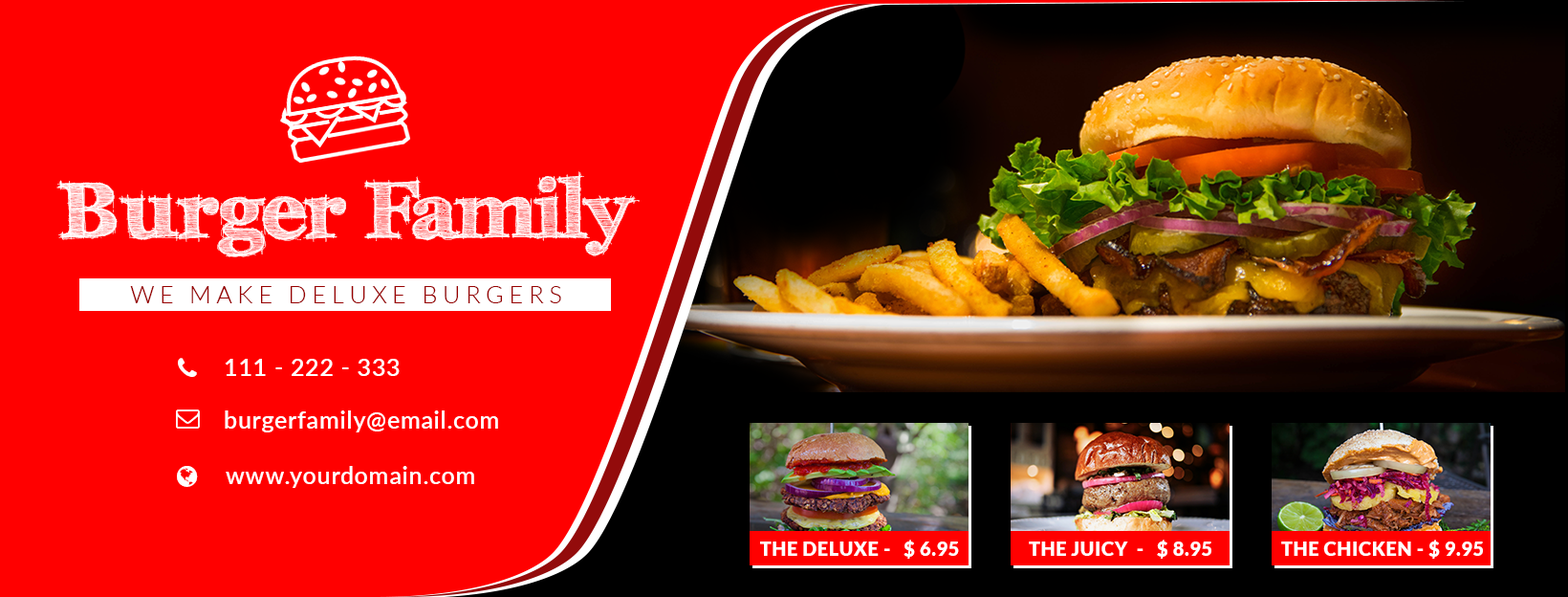
<style>
.page{position:relative;width:1568px;height:597px;background:#ff0000}
.page>*{position:absolute;margin:0}
.t1{font:80.3px "FFFTusj-Bold";color:#ffffff}
.t2{font:23.9px "Lato-Light";letter-spacing:0.23em;color:#980000;text-transform:uppercase}
.t3{font:23.9px "Lato-Semibold";letter-spacing:0.03em;color:#ffffff;text-transform:uppercase}
.t4{font:23.9px "Lato-Semibold";letter-spacing:0.03em;color:#ffffff}
.t5{font:19.1px "Lato-Black";letter-spacing:0.03em;color:#ffffff;text-transform:uppercase}
</style>
<div class="page">
<p class="t1" style="left:56px;top:171px;width:584px;height:86px">Burger Family</p>
<p class="t2" style="left:130px;top:286px;width:431px;height:17px">We make deluxe burgers</p>
<p class="t3" style="left:225px;top:359px;width:175px;height:17px">111 - 222 - 333</p>
<p class="t4" style="left:225px;top:410px;width:273px;height:22px">burgerfamily@email.com</p>
<p class="t4" style="left:226px;top:466px;width:248px;height:22px">www.yourdomain.com</p>
<p class="t5" style="left:760px;top:539px;width:199px;height:19px">The deluxe -   $ 6.95</p>
<p class="t5" style="left:1029px;top:539px;width:182px;height:19px">The Juicy  -   $ 8.95</p>
<p class="t5" style="left:1281px;top:539px;width:202px;height:19px">The chicken - $ 9.95</p>
</div>
